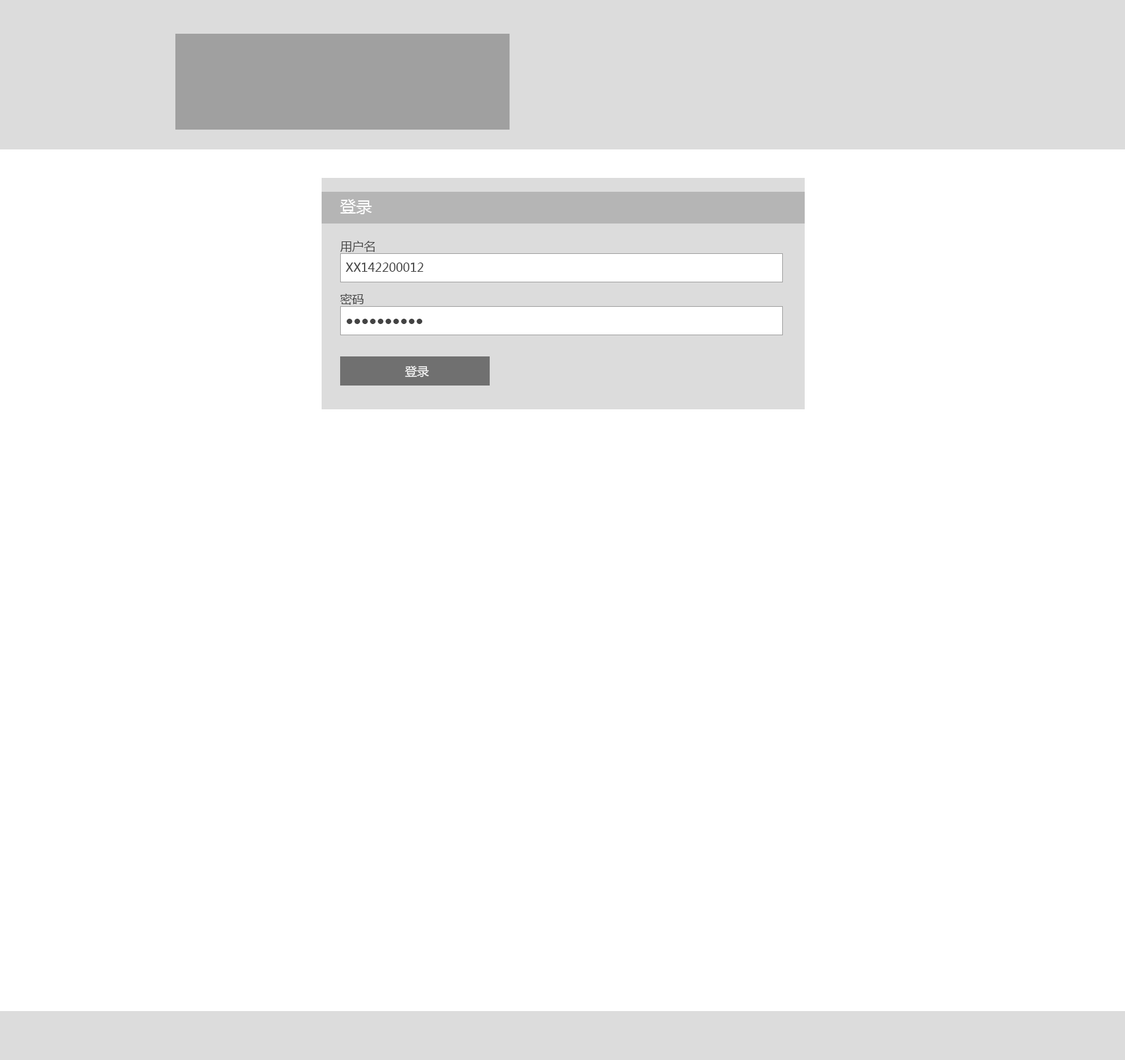
<style>
.page{position:relative;width:1125px;height:1060px;background:#ffffff}
.page>*{position:absolute;margin:0}
.t1{font:15.9px "MicrosoftYaHei";color:#ffffff}
.t2{font:11.9px "MicrosoftYaHei";color:#434343}
.t3{font:11.9px "MicrosoftYaHei";color:#ffffff}
</style>
<div class="page">
<p class="t1" style="left:340px;top:199px;width:32px;height:15px">登录</p>
<p class="t2" style="left:340px;top:241px;width:35px;height:11px">用户名</p>
<p class="t2" style="left:345px;top:263px;width:78px;height:9px">XX142200012</p>
<p class="t2" style="left:340px;top:294px;width:24px;height:11px">密码</p>
<p class="t2" style="left:346px;top:319px;width:77px;height:5px">●●●●●●●●●●</p>
<p class="t3" style="left:405px;top:366px;width:24px;height:12px">登录</p>
</div>
